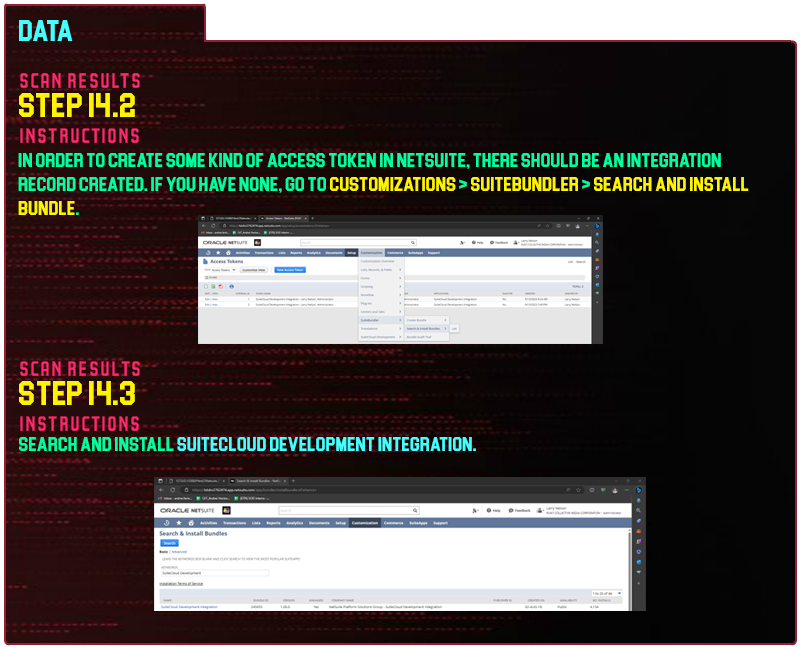
<style>
.page{position:relative;width:800px;height:650px}
.page>*{position:absolute;margin:0}
.t1{font:30px "Blockletter";color:#43ffff}
.t2{font:35px "Party-Lights-[WLM]-Flat";color:#ff296d}
.t3{font:35px "Blockletter";color:#fdf500}
.t4{font:20px "Blockletter";color:#00ff9f}
.t5{font:20px "Blockletter";color:#fdf500}
.t6{font:34.9px "Party-Lights-[WLM]-Flat";color:#ff296d}
.t7{font:34.8px "Blockletter";color:#fdf500}
.t8{font:34.8px "Party-Lights-[WLM]-Flat";color:#ff296d}
.t9{font:19.9px "Blockletter";color:#43ffff}
.t10{font:19.9px "Blockletter";color:#00ff9f}
</style>
<div class="page">
<p class="t1" style="left:19px;top:20px;width:54px;height:21px">Data</p>
<p class="t2" style="left:20px;top:73px;width:120px;height:15px">Scan REsults</p>
<p class="t3" style="left:19px;top:93px;width:116px;height:24px">Step 14.2</p>
<p class="t2" style="left:20px;top:128px;width:119px;height:15px">instructions</p>
<p class="t4" style="left:18px;top:153px;width:731px;height:62px">in order to create some kind of access token in netsuite, there should be an integration record created. if you have none, go to <span class="t5">customizations</span> &gt; <span class="t5">suitebundler</span> &gt; <span class="t5">search and install bundle</span>.</p>
<p class="t6" style="left:20px;top:361px;width:120px;height:15px">Scan REsults</p>
<p class="t7" style="left:19px;top:381px;width:116px;height:24px">Step 14.3</p>
<p class="t8" style="left:20px;top:416px;width:119px;height:15px">instructions</p>
<p class="t9" style="left:19px;top:437px;width:457px;height:14px"><span class="t10">Search and install </span>suitecloud development integration.</p>
</div>
